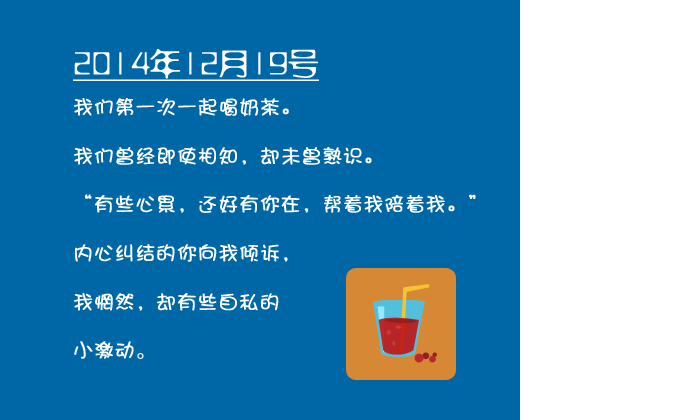
<style>
.page{position:relative;width:700px;height:420px;background:#0067a6}
.page>*{position:absolute;margin:0}
.t1{font:20px/48.7px "DFPShaoNvW5";letter-spacing:0.01em;color:#ffffff;font-weight:bold}
.t2{font:30px/48.7px "FZXSHJW--GB1-0";letter-spacing:0.01em;color:#ffffff;font-weight:bold;text-decoration:underline}
.t3{font:20px/48.7px "FZXSHJW--GB1-0";letter-spacing:0.01em;color:#ffffff;font-weight:bold}
</style>
<div class="page">
<p class="t1" style="left:73px;top:49px;width:403px;height:310px"><span class="t2">2014年12月19号<br></span>我们第一次一起喝奶茶。<br>我们曾经即使相知，却未曾熟识。<br>“有些心累，还好有你在，帮着我陪着我。”<br>内心纠结的你向我倾诉，<br>我惘然，却有些自私的<br>小激动<span class="t3">。</span></p>
</div>
